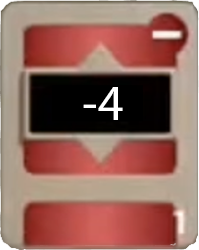
<style>
.page{position:relative;width:199px;height:250px}
.page>*{position:absolute;margin:0}
.t1{font:50px "MyriadPro-Regular";color:#ffffff}
</style>
<div class="page">
<p class="t1" style="left:83px;top:87px;width:40px;height:33px">-4</p>
</div>
